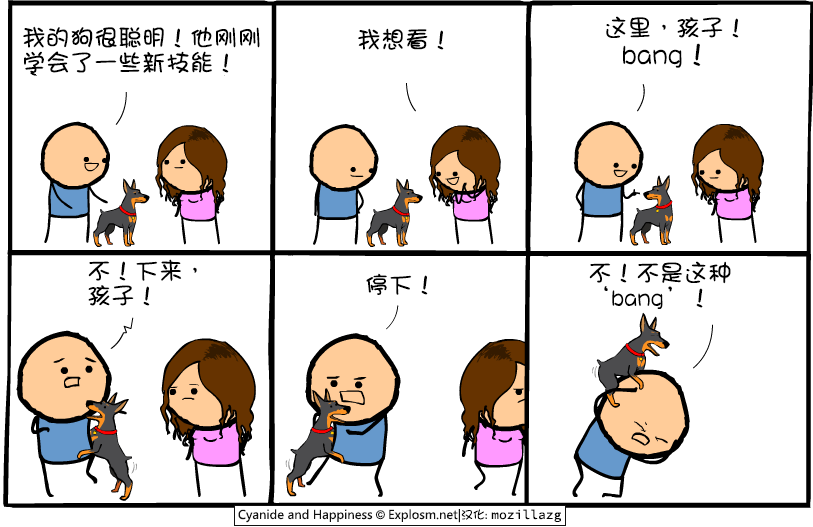
<style>
.page{position:relative;width:813px;height:527px;background:#ffffff}
.page>*{position:absolute;margin:0}
.t1{font:24px/25px "DFGirl";color:#000000}
.t2{font:28px/25px "DFGirl";color:#000000}
.t3{font:24px "DFGirl";color:#000000}
</style>
<div class="page">
<p class="t1" style="left:606px;top:16px;width:133px;height:52px">这里，孩子！<br><span class="t2">  bang！</span></p>
<p class="t1" style="left:23px;top:26px;width:237px;height:48px">我的狗很聪明！他刚刚<br>学会了一些新技能！</p>
<p class="t3" style="left:358px;top:28px;width:86px;height:22px">我想看！</p>
<p class="t1" style="left:88px;top:259px;width:109px;height:47px">不！下来，<br>孩子！</p>
<p class="t1" style="left:589px;top:261px;width:142px;height:48px">不！不是这种<br>‘bang’！</p>
<p class="t3" style="left:366px;top:273px;width:62px;height:22px">停下！</p>
</div>
